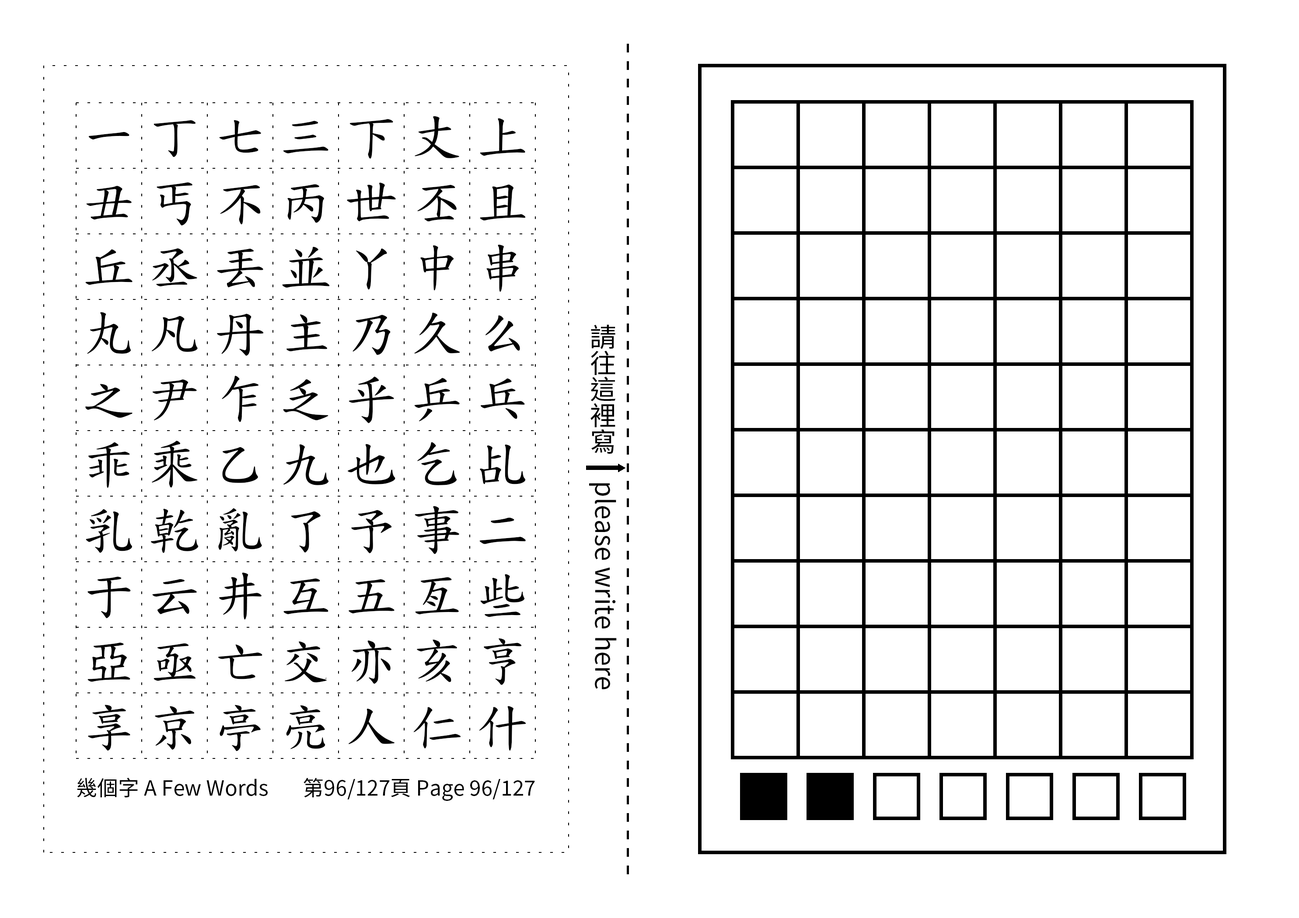
<style>
.page{position:relative;width:1299px;height:918px;background:#ffffff}
.page>*{position:absolute;margin:0}
.t1{font:52.5px/65.6px "TW-Kai-98_1";letter-spacing:0.25em;color:#000000}
.t2{font:26.2px "SourceHanSansTC-Regular";color:#000000}
.t3{font:21px "SourceHanSansTC-Regular";color:#000000}
</style>
<div class="page">
<p class="t1" style="left:85px;top:116px;width:441px;height:636px;text-align:center">一丁七三下丈上丑丐不丙世丕且丘丞丟並丫中串丸凡丹主乃久么之尹乍乏乎乒乓乖乘乙九也乞乩乳乾亂了予事二于云井互五亙些亞亟亡交亦亥亨享京亭亮人仁什</p>
<p class="t2" style="left:589px;top:324px;width:28px;height:366px;text-align:center">請往這裡寫　please write here</p>
<p class="t3" style="left:77px;top:778px;width:191px;height:20px">幾個字 A Few Words</p>
<p class="t3" style="left:303px;top:778px;width:232px;height:23px">第96/127頁 Page 96/127</p>
</div>
